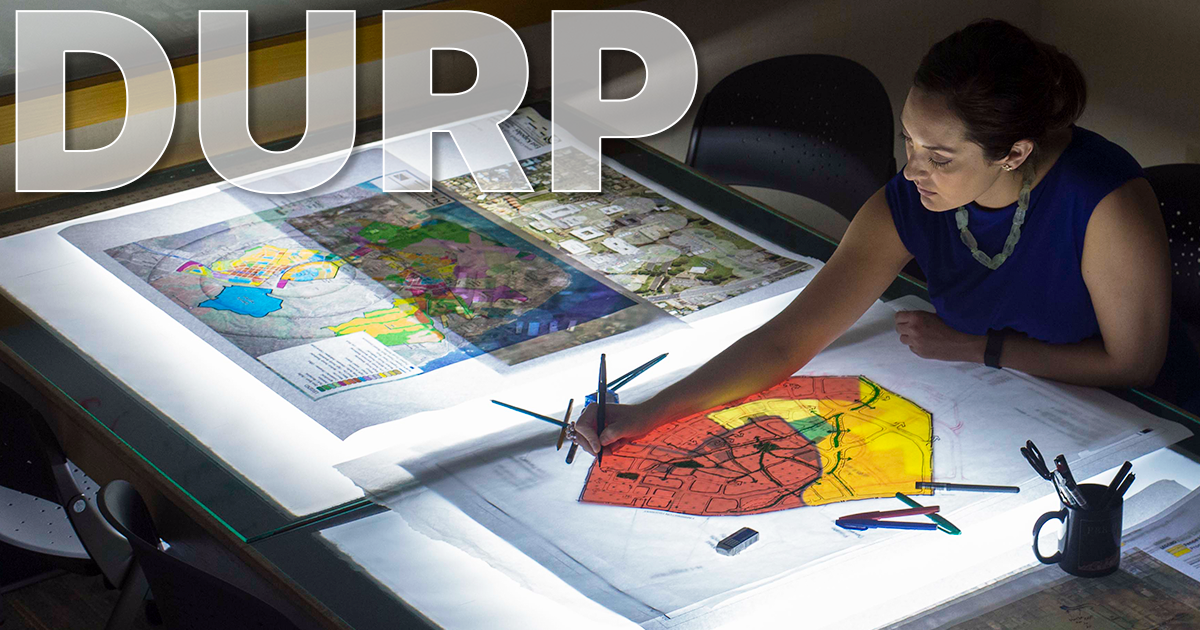
<style>
.page{position:relative;width:1200px;height:630px}
.page>*{position:absolute;margin:0}
.t1{font:250px "Inter-Black";color:#b3b0a9}
</style>
<div class="page">
<p class="t1" style="left:15px;top:10px;width:683px;height:185px">DURP</p>
</div>
